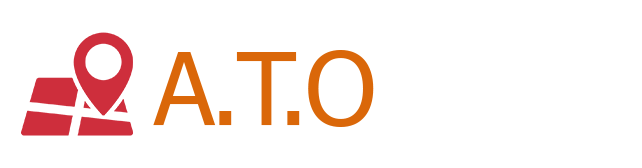
<style>
.page{position:relative;width:642px;height:168px;background:#ffffff}
.page>*{position:absolute;margin:0}
.t1{font:100px "Tahoma";letter-spacing:-0.04em;color:#da6709;text-transform:uppercase}
</style>
<div class="page">
<p class="t1" style="left:153px;top:50px;width:221px;height:77px">A.T.O</p>
</div>
